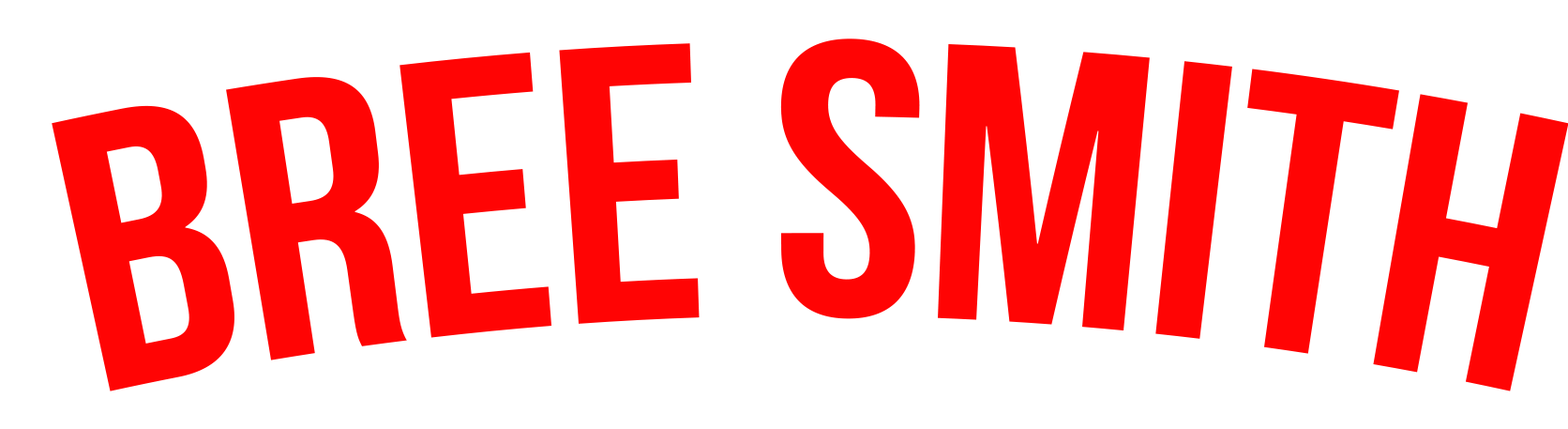
<style>
.page{position:relative;width:1568px;height:429px;background:#ffffff}
.page>*{position:absolute;margin:0}
.t1{font:390.7px "BebasNeue";color:#ff0404}
</style>
<div class="page">
<p class="t1" style="left:52px;top:38px;width:1517px;height:353px">BREE SMITH</p>
</div>
